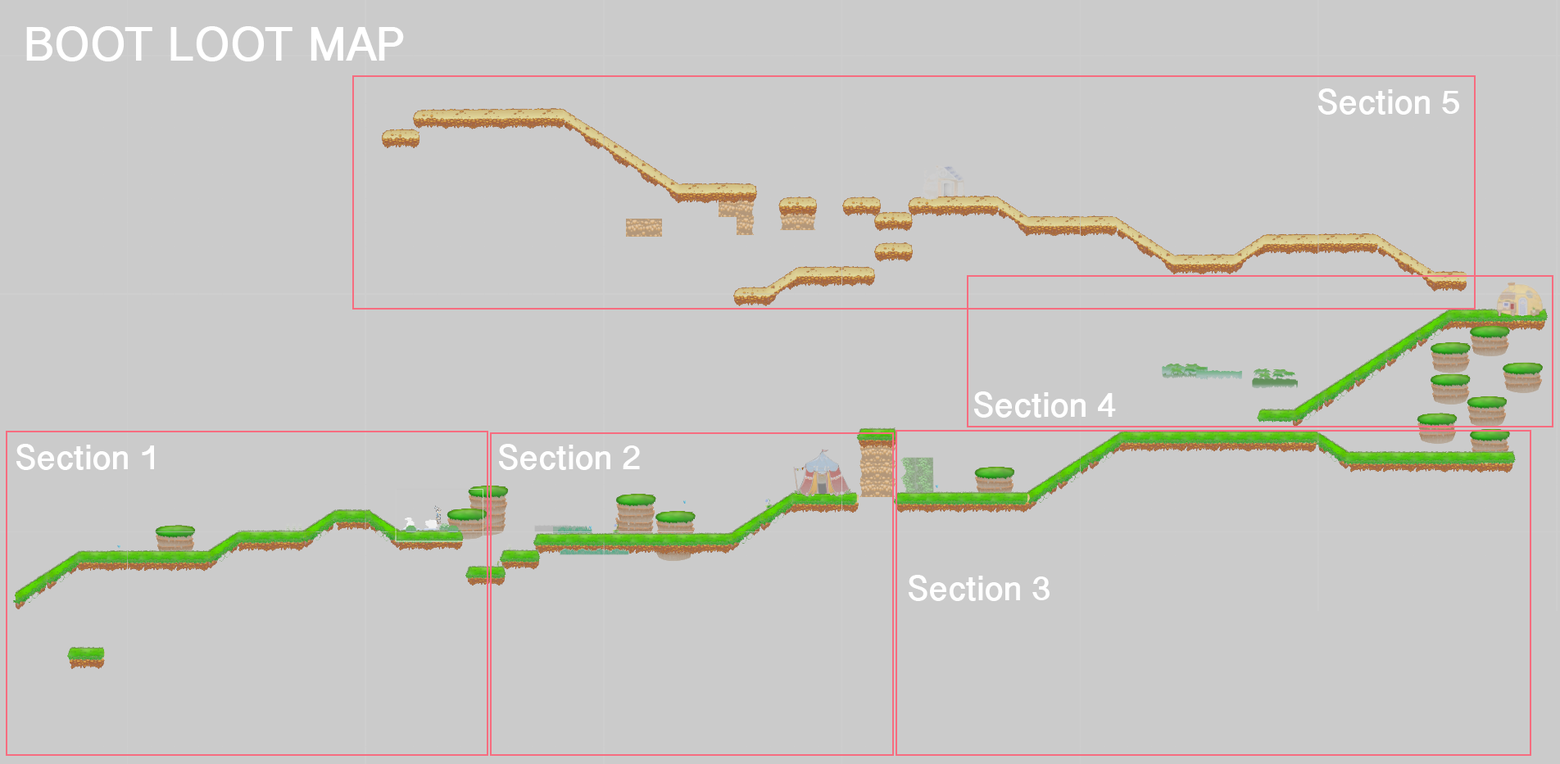
<style>
.page{position:relative;width:1560px;height:764px;background:#cbcbcb}
.page>*{position:absolute;margin:0}
.t1{font:49.2px "GujaratiSangamMN-Bold";color:#ffffff}
.t2{font:34.8px "GujaratiSangamMN-Bold";color:#ffffff}
</style>
<div class="page">
<p class="t1" style="left:26px;top:26px;width:378px;height:35px">BOOT LOOT MAP</p>
<p class="t2" style="left:1318px;top:88px;width:141px;height:27px">Section 5</p>
<p class="t2" style="left:974px;top:392px;width:142px;height:26px">Section 4</p>
<p class="t2" style="left:16px;top:444px;width:138px;height:26px">Section 1</p>
<p class="t2" style="left:499px;top:444px;width:141px;height:26px">Section 2</p>
<p class="t2" style="left:909px;top:575px;width:141px;height:26px">Section 3</p>
</div>
